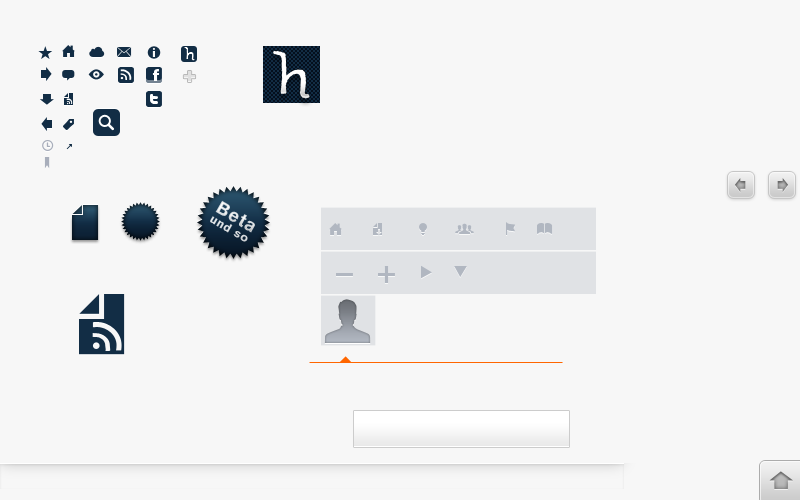
<style>
.page{position:relative;width:800px;height:500px;background:#f7f7f7}
.page>*{position:absolute;margin:0}
.t1{font:18px "AkzidenzGrotesk-Black";letter-spacing:0.05em;color:#dde2e5}
.t2{font:12px "AkzidenzGrotesk-Black";letter-spacing:0.05em;color:#dadee0}
</style>
<div class="page">
<p class="t1" style="left:215px;top:200px;width:40px;height:33px;rotate:30deg">Beta</p>
<p class="t2" style="left:210px;top:216px;width:38px;height:26px;rotate:30deg">und so</p>
</div>
